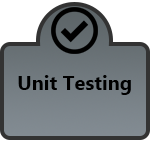
<style>
.page{position:relative;width:150px;height:150px;background:#ffffff}
.page>*{position:absolute;margin:0}
.t1{font:20px "Gadugi-Bold";color:#000000}
</style>
<div class="page">
<p class="t1" style="left:18px;top:75px;width:113px;height:20px">Unit Testing</p>
</div>
